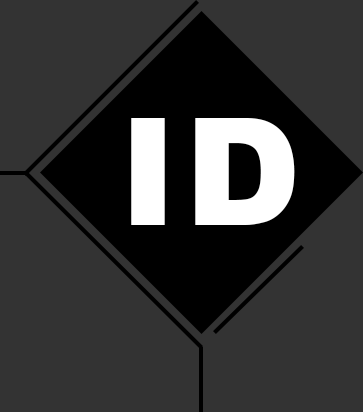
<style>
.page{position:relative;width:363px;height:412px;background:#333333}
.page>*{position:absolute;margin:0}
.t1{font:150px "Arial-Black";letter-spacing:0.05em;color:#ffffff}
</style>
<div class="page">
<p class="t1" style="left:131px;top:118px;width:164px;height:107px">ID</p>
</div>
